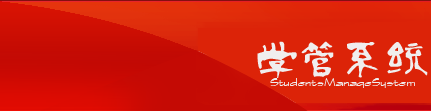
<style>
.page{position:relative;width:431px;height:111px;background:#dc2308}
.page>*{position:absolute;margin:0}
.t1{font:43.4px "-";letter-spacing:-0.003em;color:#f0eeee}
.t2{font:9.2px "CityBlueprint";color:#f0eeee;scale:1.85 1}
</style>
<div class="page">
<p class="t1" style="left:257px;top:41px;width:171px;height:37px">学管系统</p>
<p class="t2" style="left:270px;top:78px;width:145px;height:10px">StudentsManageSystem</p>
</div>
